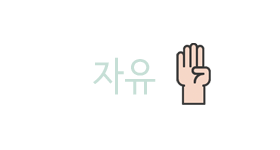
<style>
.page{position:relative;width:280px;height:150px;background:#ffffff}
.page>*{position:absolute;margin:0}
.t1{font:40px "SeN-CM";color:#c6dfd6}
</style>
<div class="page">
<p class="t1" style="left:93px;top:57px;width:63px;height:38px">자유</p>
</div>
